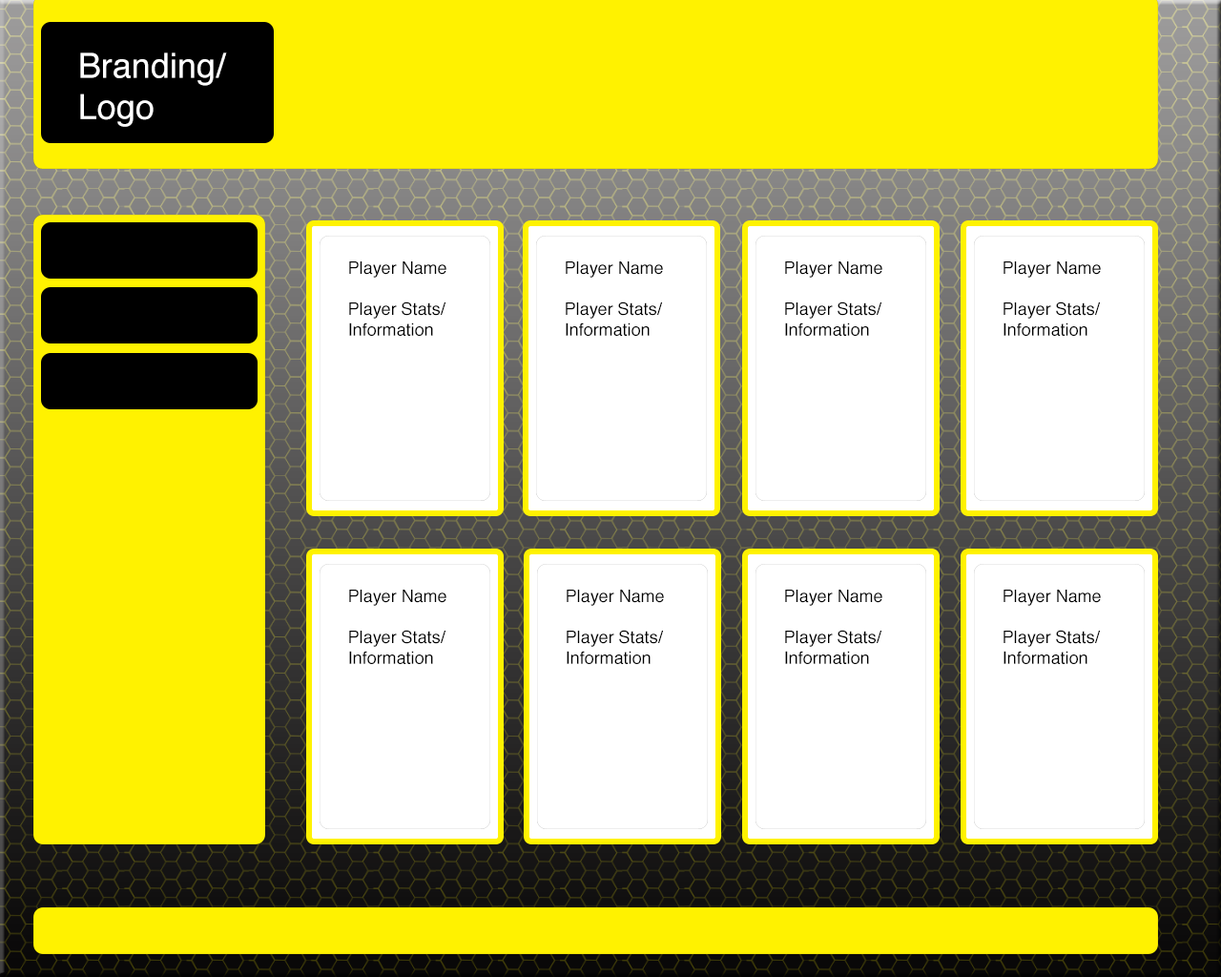
<style>
.page{position:relative;width:1221px;height:977px;background:#ffffff}
.page>*{position:absolute;margin:0}
.t1{font:34.3px "Helvetica";color:#ffffff}
.t2{font:17.2px "Helvetica";color:#000000}
</style>
<div class="page">
<p class="t1" style="left:80px;top:52px;width:147px;height:75px">Branding/<br>Logo</p>
<p class="t2" style="left:349px;top:261px;width:97px;height:75px">Player Name<br><br>Player Stats/<br>Information</p>
<p class="t2" style="left:566px;top:261px;width:97px;height:75px">Player Name<br><br>Player Stats/<br>Information</p>
<p class="t2" style="left:785px;top:261px;width:97px;height:75px">Player Name<br><br>Player Stats/<br>Information</p>
<p class="t2" style="left:1003px;top:261px;width:98px;height:75px">Player Name<br><br>Player Stats/<br>Information</p>
<p class="t2" style="left:349px;top:589px;width:97px;height:75px">Player Name<br><br>Player Stats/<br>Information</p>
<p class="t2" style="left:567px;top:589px;width:97px;height:75px">Player Name<br><br>Player Stats/<br>Information</p>
<p class="t2" style="left:785px;top:589px;width:97px;height:75px">Player Name<br><br>Player Stats/<br>Information</p>
<p class="t2" style="left:1003px;top:589px;width:98px;height:75px">Player Name<br><br>Player Stats/<br>Information</p>
</div>
